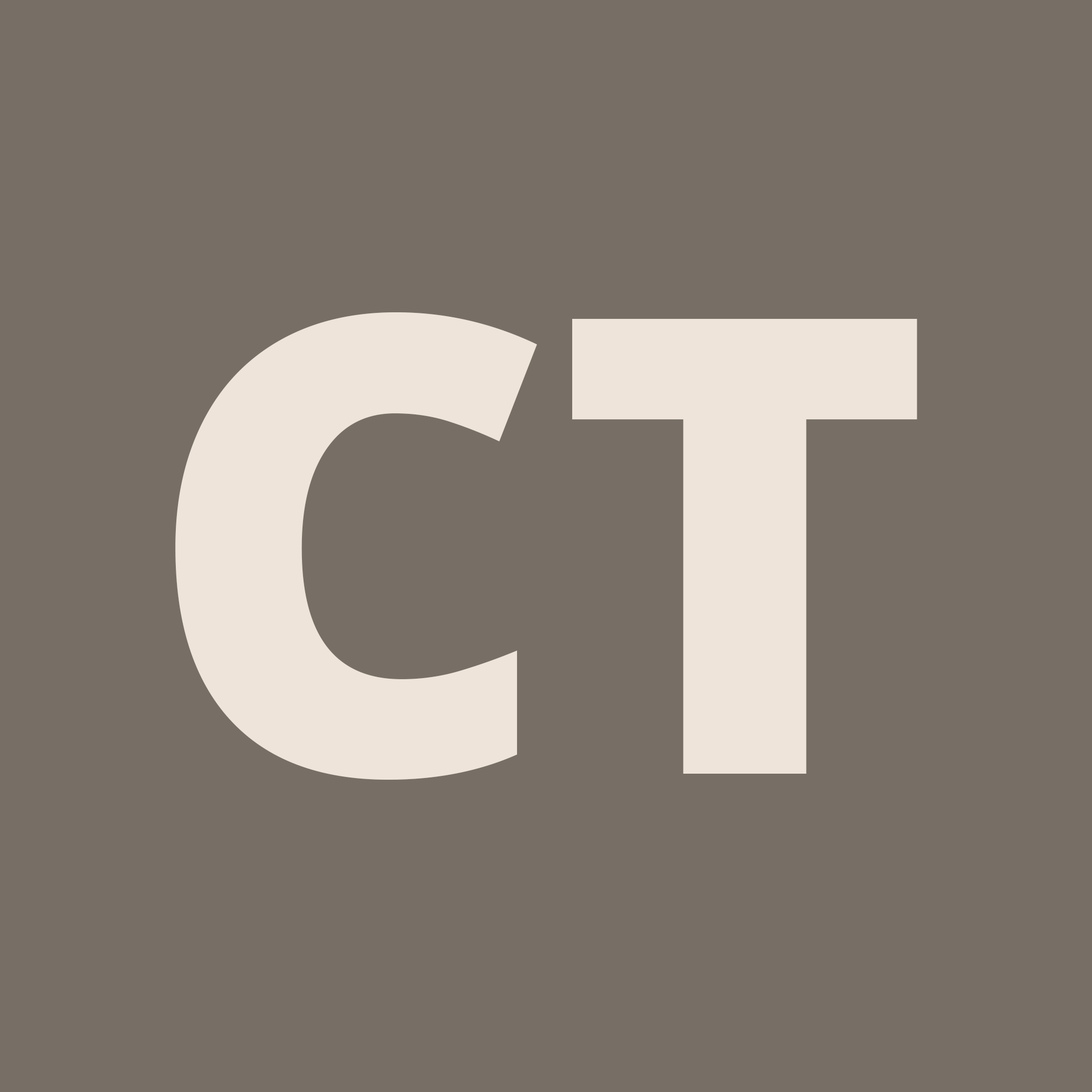
<style>
.page{position:relative;width:1092px;height:1092px;background:#776f65}
.page>*{position:absolute;margin:0}
.t1{font:637px "OpenSans-Extrabold";color:#eee4da}
</style>
<div class="page">
<p class="t1" style="left:175px;top:312px;width:742px;height:468px">CT</p>
</div>
